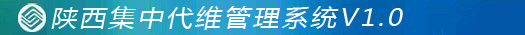
<style>
.page{position:relative;width:525px;height:35px}
.page>*{position:absolute;margin:0}
.t1{font:23.9px "MicrosoftYaHei";letter-spacing:0.1em;color:#ffffff;font-style:italic;scale:1.1 1}
</style>
<div class="page">
<p class="t1" style="left:51px;top:6px;width:352px;height:24px">陕西集中代维管理系统V1.0</p>
</div>
